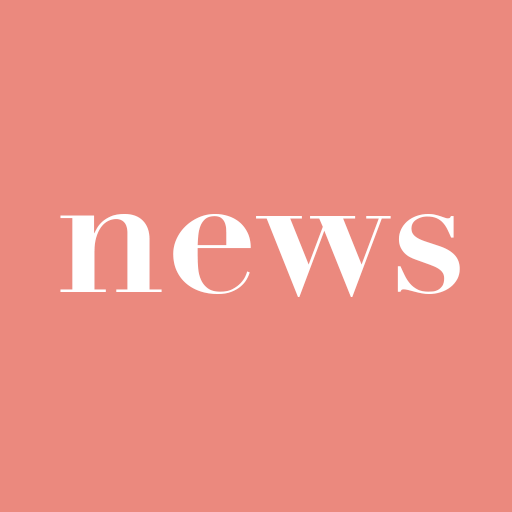
<style>
.page{position:relative;width:512px;height:512px;background:#eb897e}
.page>*{position:absolute;margin:0}
.t1{font:176.9px "Didot-Bold";color:#ffffff}
</style>
<div class="page">
<p class="t1" style="left:60px;top:214px;width:400px;height:83px">news</p>
</div>
